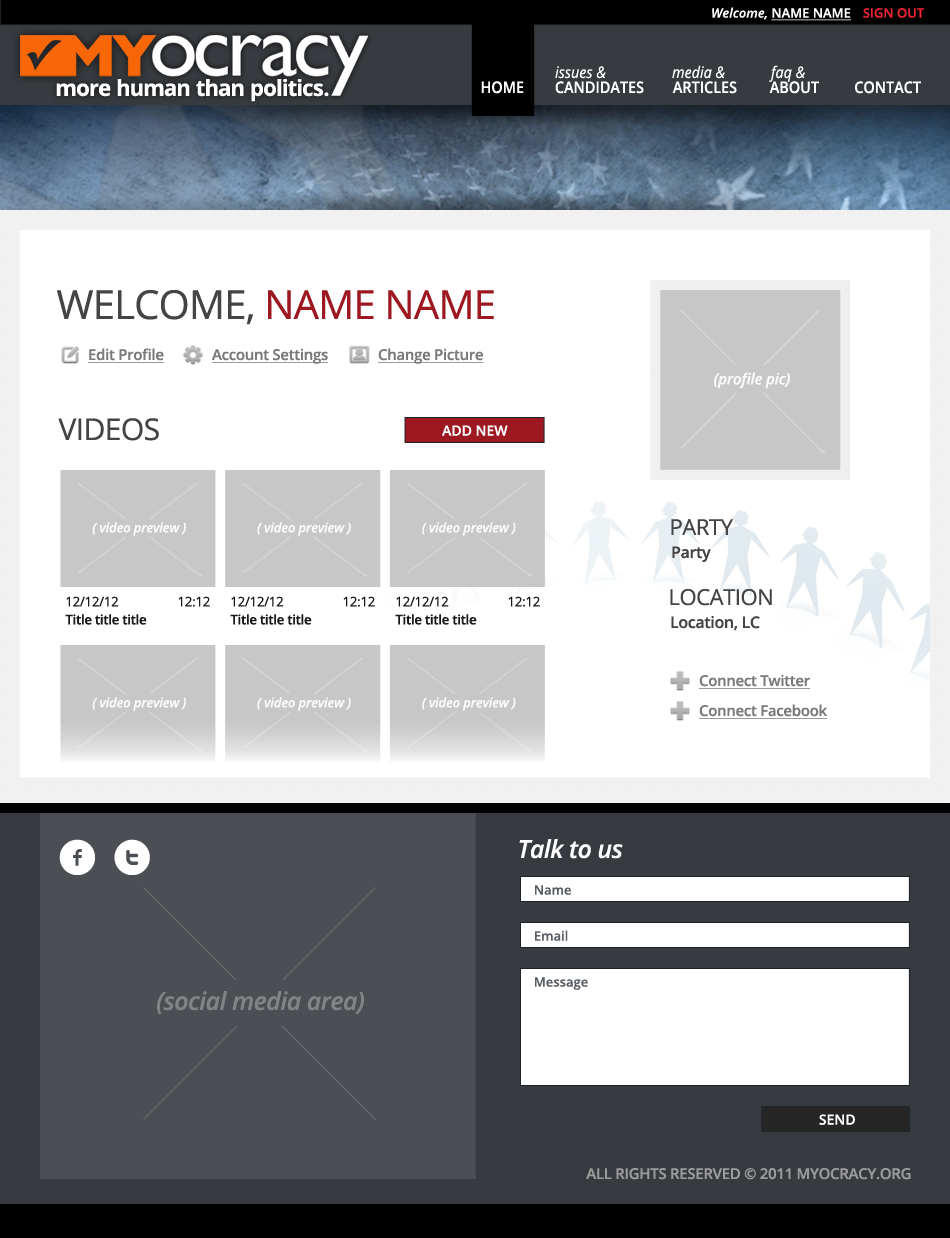
<style>
.page{position:relative;width:950px;height:1238px;background:#ffffff}
.page>*{position:absolute;margin:0}
.t1{font:13px "OpenSans-Semibold";color:#ffffff;text-transform:uppercase;text-decoration:underline}
.t2{font:13px "OpenSans-SemiboldItalic";color:#ffffff}
.t3{font:13px "OpenSans-Semibold";color:#ec2432;text-transform:uppercase}
.t4{font:16px "OpenSans-Italic";color:#ffffff;scale:0.9 1}
.t5{font:22.2px "OpenSans-Bold";letter-spacing:-0.02em;color:#ffffff}
.t6{font:16px "OpenSans-Semibold";color:#ffffff;text-transform:uppercase;scale:0.9 1}
.t7{font:40px "OpenSans";letter-spacing:-0.02em;color:#9e1822;text-transform:uppercase}
.t8{font:40px "OpenSans";letter-spacing:-0.02em;color:#444444;text-transform:uppercase}
.t9{font:15px "OpenSans-Semibold";letter-spacing:-0.02em;color:#7a7a7a;text-decoration:underline}
.t10{font:15.4px "OpenSans-SemiboldItalic";letter-spacing:-0.02em;color:#ffffff}
.t11{font:30px "OpenSans";letter-spacing:-0.02em;color:#444444;text-transform:uppercase}
.t12{font:14px "OpenSans-Semibold";color:#ffffff}
.t13{font:22px "OpenSans";letter-spacing:-0.02em;color:#444444;text-transform:uppercase}
.t14{font:13.3px "OpenSans-SemiboldItalic";letter-spacing:-0.02em;color:#ffffff}
.t15{font:16px "OpenSans-Semibold";letter-spacing:-0.02em;color:#444444}
.t16{font:13.3px "OpenSans";letter-spacing:-0.02em;color:#191919}
.t17{font:13.3px "OpenSans-Semibold";letter-spacing:-0.02em;color:#191919}
.t18{font:50px "Socialico";letter-spacing:0.3em;color:#ffffff}
.t19{font:25px "OpenSans-SemiboldItalic";letter-spacing:-0.02em;color:#ffffff}
.t20{font:13px "OpenSans-Semibold";color:#5a5e65}
.t21{font:25px "OpenSans-SemiboldItalic";letter-spacing:-0.02em;color:#818386}
.t22{font:15px "OpenSans-Semibold";letter-spacing:-0.02em;color:#9c9c9c;text-transform:uppercase}
</style>
<div class="page">
<p class="t1" style="left:712px;top:7px;width:139px;height:14px"><span class="t2">Welcome, </span>NAME NAME</p>
<p class="t3" style="left:863px;top:8px;width:61px;height:10px">Sign out</p>
<p class="t4" style="left:672px;top:65px;width:53px;height:14px">media &amp;</p>
<p class="t4" style="left:769px;top:65px;width:36px;height:17px">faq &amp;</p>
<p class="t4" style="left:555px;top:66px;width:51px;height:13px">issues &amp;</p>
<p class="t5" style="left:56px;top:79px;width:273px;height:23px">more human than politics.</p>
<p class="t6" style="left:481px;top:81px;width:43px;height:13px">home</p>
<p class="t6" style="left:555px;top:81px;width:89px;height:13px">candidates</p>
<p class="t6" style="left:672px;top:81px;width:65px;height:13px">articles</p>
<p class="t6" style="left:769px;top:81px;width:50px;height:13px">ABOUT</p>
<p class="t6" style="left:855px;top:81px;width:66px;height:13px">contact</p>
<p class="t7" style="left:57px;top:290px;width:437px;height:35px"><span class="t8">Welcome, </span>Name Name</p>
<p class="t9" style="left:88px;top:348px;width:76px;height:15px">Edit Profile</p>
<p class="t9" style="left:212px;top:348px;width:116px;height:16px">Account Settings</p>
<p class="t9" style="left:378px;top:348px;width:106px;height:16px">Change Picture</p>
<p class="t10" style="left:714px;top:372px;width:76px;height:17px">(profile pic)</p>
<p class="t11" style="left:58px;top:418px;width:101px;height:23px">Videos</p>
<p class="t12" style="left:442px;top:425px;width:66px;height:11px">ADD NEW</p>
<p class="t13" style="left:671px;top:519px;width:63px;height:16px">Party</p>
<p class="t14" style="left:92px;top:522px;width:94px;height:14px">( video preview )</p>
<p class="t14" style="left:257px;top:522px;width:94px;height:14px">( video preview )</p>
<p class="t14" style="left:422px;top:522px;width:94px;height:14px">( video preview )</p>
<p class="t15" style="left:672px;top:546px;width:39px;height:16px">Party</p>
<p class="t13" style="left:670px;top:589px;width:102px;height:17px">Location</p>
<p class="t16" style="left:66px;top:596px;width:53px;height:11px">12/12/12</p>
<p class="t16" style="left:178px;top:596px;width:32px;height:11px">12:12</p>
<p class="t16" style="left:231px;top:596px;width:53px;height:11px">12/12/12</p>
<p class="t16" style="left:343px;top:596px;width:32px;height:11px">12:12</p>
<p class="t16" style="left:396px;top:596px;width:53px;height:11px">12/12/12</p>
<p class="t16" style="left:508px;top:596px;width:32px;height:11px">12:12</p>
<p class="t17" style="left:65px;top:614px;width:82px;height:11px">Title title title</p>
<p class="t17" style="left:230px;top:614px;width:82px;height:11px">Title title title</p>
<p class="t17" style="left:395px;top:614px;width:82px;height:11px">Title title title</p>
<p class="t15" style="left:671px;top:616px;width:89px;height:15px">Location, LC</p>
<p class="t9" style="left:699px;top:674px;width:111px;height:15px">Connect Twitter</p>
<p class="t14" style="left:92px;top:697px;width:94px;height:14px">( video preview )</p>
<p class="t14" style="left:257px;top:697px;width:94px;height:14px">( video preview )</p>
<p class="t14" style="left:422px;top:697px;width:94px;height:14px">( video preview )</p>
<p class="t9" style="left:699px;top:704px;width:129px;height:15px">Connect Facebook</p>
<p class="t18" style="left:59px;top:839px;width:91px;height:36px">ft</p>
<p class="t19" style="left:519px;top:839px;width:104px;height:20px">Talk to us</p>
<p class="t20" style="left:535px;top:885px;width:36px;height:10px">Name</p>
<p class="t20" style="left:535px;top:930px;width:33px;height:11px">Email</p>
<p class="t20" style="left:535px;top:977px;width:53px;height:13px">Message</p>
<p class="t21" style="left:157px;top:991px;width:207px;height:23px">(social media area)</p>
<p class="t12" style="left:819px;top:1114px;width:36px;height:11px">SEND</p>
<p class="t22" style="left:586px;top:1168px;width:325px;height:12px">all rights reserved © 2011 myocracy.org</p>
</div>
